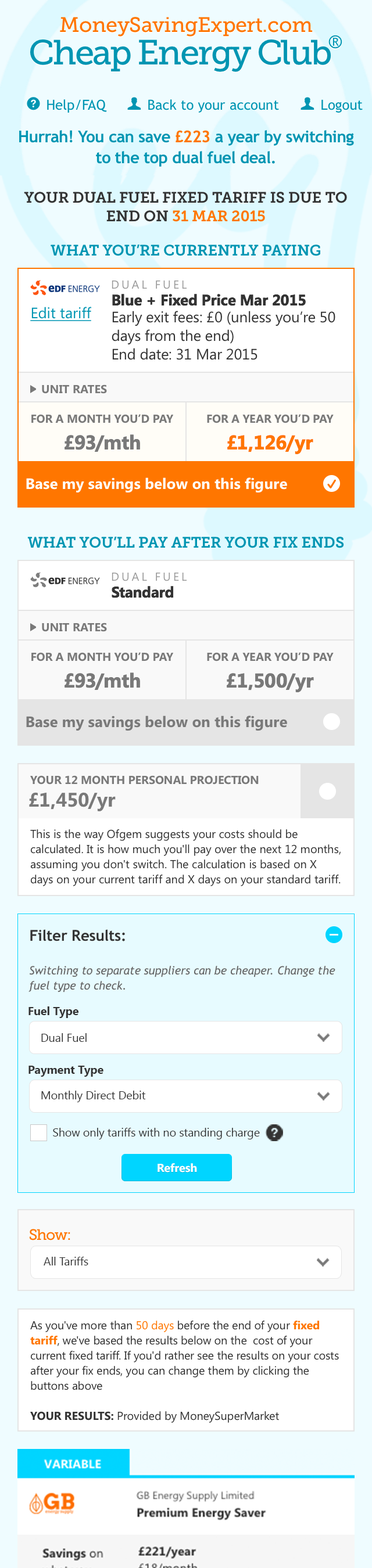
<style>
.page{position:relative;width:372px;height:1568px;background:#ffffff}
.page>*{position:absolute;margin:0}
.t1{font:15.1px/18.6px "MuseoSlab-700";letter-spacing:-0.01em;color:#333333;text-transform:uppercase}
.t2{font:15.1px/18.6px "MuseoSlab-700";letter-spacing:-0.01em;color:#ff7600;text-transform:uppercase}
.t3{font:15.1px "MuseoSlab-700";letter-spacing:-0.01em;color:#0095b2;text-transform:uppercase}
.t4{font:11.6px "SegoeUI";letter-spacing:0.2em;color:#999999;text-transform:uppercase}
.t5{font:15.1px "SegoeUI-Bold";letter-spacing:-0.01em;color:#333333}
.t6{font:15.1px "SegoeUI";color:#0095b2;text-decoration:underline}
.t7{font:15.1px/18.6px "SegoeUI";letter-spacing:-0.01em;color:#333333}
.t8{font:11.6px "SegoeUI-Bold";color:#797979;text-transform:uppercase}
.t9{font:11.6px "SegoeUI-Bold";letter-spacing:-0.01em;color:#797979;text-transform:uppercase}
.t10{font:19.7px "SegoeUI-Bold";color:#797979;text-transform:uppercase}
.t11{font:19.7px "SegoeUI-Bold";color:#797979}
.t12{font:19.7px "SegoeUI-Bold";color:#ff7600;text-transform:uppercase}
.t13{font:19.7px "SegoeUI-Bold";color:#ff7600}
.t14{font:15.1px "SegoeUI-Bold";color:#ffffff}
.t15{font:15.1px "SegoeUI-Bold";color:#797979}
.t16{font:11.6px/15.1px "SegoeUI";color:#333333}
.t17{font:15.1px "TrebuchetMS-Bold";letter-spacing:-0.01em;color:#333333}
.t18{font:11.6px/15.1px "TrebuchetMS-Italic";letter-spacing:-0.01em;color:#666666}
.t19{font:11.6px "SegoeUI-Bold";letter-spacing:-0.01em;color:#333333}
.t20{font:11.6px "SegoeUI";letter-spacing:-0.01em;color:#333333}
.t21{font:11.6px "SegoeUI-Bold";letter-spacing:-0.01em;color:#ffffff}
.t22{font:15.1px "MuseoSlab-500";letter-spacing:-0.05em;color:#ff7600}
.t23{font:11.6px/15.1px "SegoeUI";letter-spacing:-0.01em;color:#333333}
.t24{font:11.6px/15.1px "SegoeUI";letter-spacing:-0.01em;color:#ff7600}
.t25{font:11.6px/15.1px "SegoeUI-Bold";letter-spacing:-0.01em;color:#ff7600}
.t26{font:11.6px/15.1px "SegoeUI-Bold";letter-spacing:-0.01em;color:#333333}
</style>
<div class="page">
<p class="t1" style="left:24px;top:192px;width:323px;height:30px;text-align:center">YOUR DUAL FUEL FIXED TARIFF IS DUE TO END ON <span class="t2">31 MAR 2015</span></p>
<p class="t3" style="left:51px;top:244px;width:269px;height:12px">what you’re currently paying</p>
<p class="t4" style="left:112px;top:280px;width:75px;height:9px">DUAL FUEL</p>
<p class="t5" style="left:112px;top:294px;width:193px;height:12px">Blue + Fixed Price Mar 2015</p>
<p class="t6" style="left:30px;top:307px;width:61px;height:14px">Edit tariff</p>
<p class="t7" style="left:112px;top:311px;width:223px;height:49px">Early exit fees: £0 (unless you’re 50<br>days from the end)<br>End date: 31 Mar 2015</p>
<p class="t8" style="left:42px;top:384px;width:65px;height:10px">unit rates</p>
<p class="t9" style="left:31px;top:414px;width:142px;height:9px">for a MONTH you’d pay</p>
<p class="t9" style="left:207px;top:414px;width:126px;height:9px">FOR A YEAR You’d PAY</p>
<p class="t10" style="left:64px;top:434px;width:76px;height:18px">£93/<span class="t11">mth</span></p>
<p class="t12" style="left:227px;top:435px;width:86px;height:19px">£1,126/<span class="t13">yr</span></p>
<p class="t14" style="left:26px;top:477px;width:261px;height:16px">Base my savings below on this figure</p>
<p class="t3" style="left:27px;top:537px;width:317px;height:11px">What you’ll pay after your fix ends</p>
<p class="t4" style="left:112px;top:573px;width:75px;height:8px">DUAL FUEL</p>
<p class="t5" style="left:112px;top:586px;width:62px;height:12px">Standard</p>
<p class="t8" style="left:42px;top:623px;width:65px;height:9px">unit rates</p>
<p class="t9" style="left:31px;top:652px;width:142px;height:9px">for a MONTH you’d pay</p>
<p class="t9" style="left:207px;top:652px;width:126px;height:9px">FOR A YEAR You’d PAY</p>
<p class="t10" style="left:64px;top:672px;width:76px;height:18px">£93/<span class="t11">mth</span></p>
<p class="t10" style="left:226px;top:673px;width:88px;height:19px">£1,500<span class="t11">/yr</span></p>
<p class="t15" style="left:26px;top:715px;width:261px;height:16px">Base my savings below on this figure</p>
<p class="t9" style="left:30px;top:775px;width:228px;height:10px">YOUR 12 month personal projection</p>
<p class="t10" style="left:29px;top:792px;width:87px;height:19px">£1,450/<span class="t11">yr</span></p>
<p class="t16" style="left:30px;top:829px;width:310px;height:57px">This is the way Ofgem suggests your costs should be calculated. It is how much you'll pay over the next 12 months, assuming you don't switch. The calculation is based on X days on your current tariff and X days on your standard tariff.</p>
<p class="t17" style="left:30px;top:929px;width:95px;height:12px">Filter Results:</p>
<p class="t18" style="left:28px;top:966px;width:307px;height:26px">Switching to separate suppliers can be cheaper. Change the fuel type to check.</p>
<p class="t19" style="left:28px;top:1006px;width:50px;height:12px">Fuel Type</p>
<p class="t20" style="left:41px;top:1033px;width:46px;height:9px">Dual Fuel</p>
<p class="t19" style="left:28px;top:1066px;width:75px;height:11px">Payment Type</p>
<p class="t20" style="left:41px;top:1091px;width:105px;height:11px">Monthly Direct Debit</p>
<p class="t20" style="left:53px;top:1128px;width:207px;height:11px">Show only tariffs with no standing charge</p>
<p class="t21" style="left:157px;top:1163px;width:40px;height:10px">Refresh</p>
<p class="t22" style="left:29px;top:1229px;width:41px;height:11px">Show:</p>
<p class="t20" style="left:44px;top:1257px;width:44px;height:8px">All Tariffs</p>
<p class="t23" style="left:30px;top:1321px;width:309px;height:102px">As you've more than<span class="t24"> 50 days</span> before the end of your <span class="t25">fixed tariff</span>, we've based the results below on the  cost of your current fixed tariff. If you'd rather see the results on your costs after your fix ends, you can change them by clicking the buttons above<br><br><span class="t26">YOUR RESULTS:</span> Provided by MoneySuperMarket</p>
</div>
